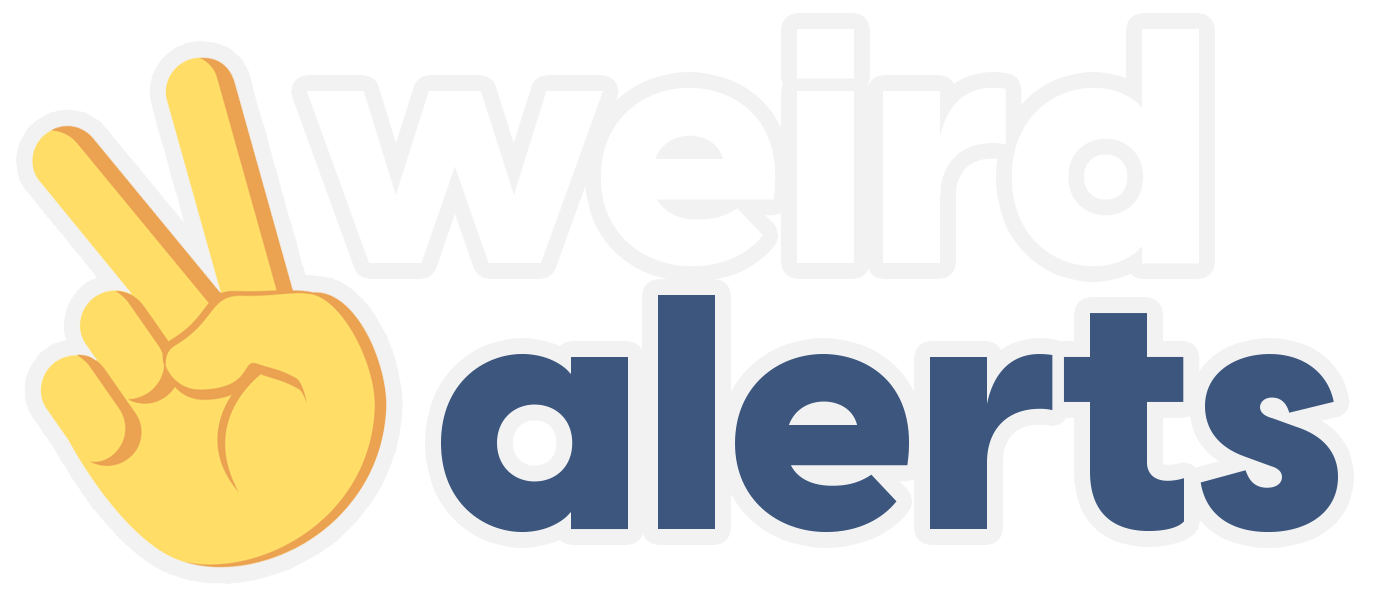
<style>
.page{position:relative;width:1375px;height:607px;background:#ffffff}
.page>*{position:absolute;margin:0}
.t1{font:330px/266px "VisbyCF-Heavy";color:#3c567e}
.t2{font:330px/266px "VisbyCF-Heavy";color:#ffffff}
</style>
<div class="page">
<p class="t1" style="left:307px;top:29px;width:1031px;height:504px"><span class="t2">weird<br></span>  alerts</p>
</div>
